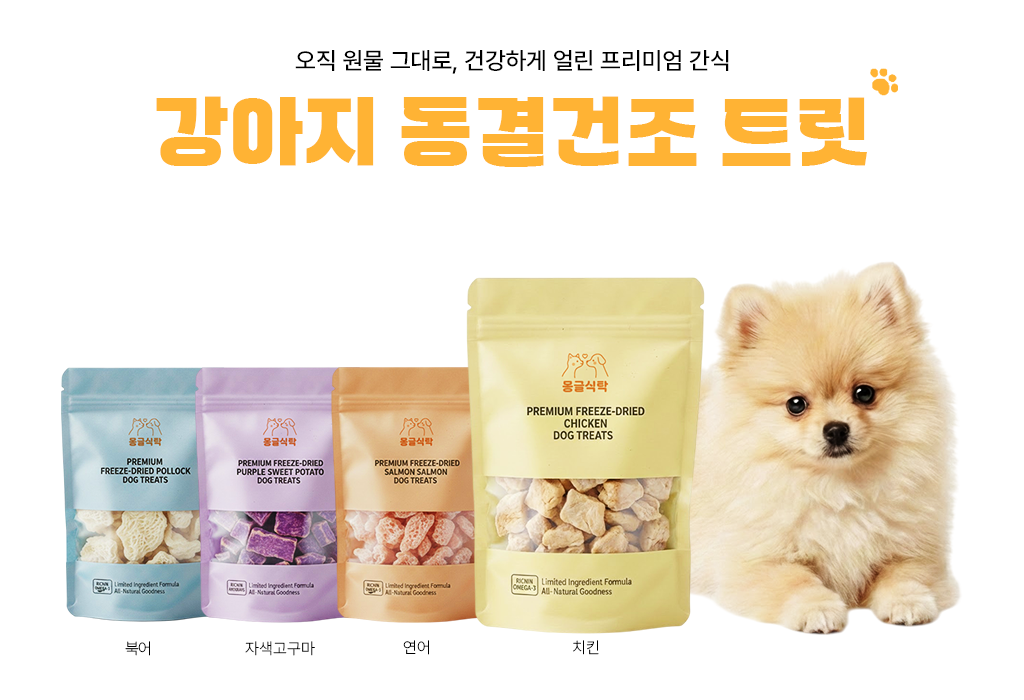
<style>
.page{position:relative;width:1024px;height:700px;background:#ffffff}
.page>*{position:absolute;margin:0}
.t1{font:24px "Pretendard-Medium";color:#000000;text-transform:uppercase}
.t2{font:80px "WAGURI-TTF";letter-spacing:0.005em;color:#ffb334;text-transform:uppercase}
.t3{font:16px "Pretendard-ExtraLight";color:#000000;text-transform:uppercase}
</style>
<div class="page">
<p class="t1" style="left:295px;top:50px;width:434px;height:24px">오직 원물 그대로, 건강하게 얼린 프리미엄 간식</p>
<p class="t2" style="left:156px;top:96px;width:711px;height:71px">강아지 동결건조 트릿</p>
<p class="t3" style="left:125px;top:641px;width:25px;height:15px">북어</p>
<p class="t3" style="left:245px;top:641px;width:70px;height:15px">자색고구마</p>
<p class="t3" style="left:403px;top:640px;width:26px;height:15px">연어</p>
<p class="t3" style="left:573px;top:640px;width:26px;height:15px">치킨</p>
</div>
